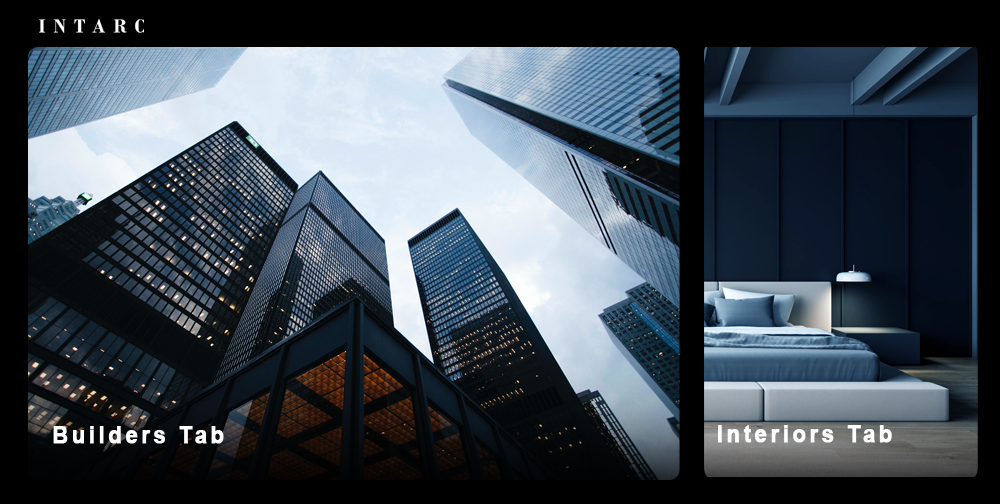
<style>
.page{position:relative;width:1000px;height:504px}
.page>*{position:absolute;margin:0}
.t1{font:24.2px "Arial-BoldMT";letter-spacing:0.14em;color:#ffffff;font-weight:bold;scale:0.91 1}
</style>
<div class="page">
<p class="t1" style="left:718px;top:425px;width:174px;height:18px">Interiors Tab</p>
<p class="t1" style="left:53px;top:426px;width:171px;height:18px">Builders Tab</p>
</div>
